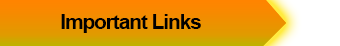
<style>
.page{position:relative;width:340px;height:46px}
.page>*{position:absolute;margin:0}
.t1{font:20.8px "Arial-BoldMT";letter-spacing:-0.05em;color:#000000}
</style>
<div class="page">
<p class="t1" style="left:61px;top:14px;width:140px;height:19px">Important Links</p>
</div>
